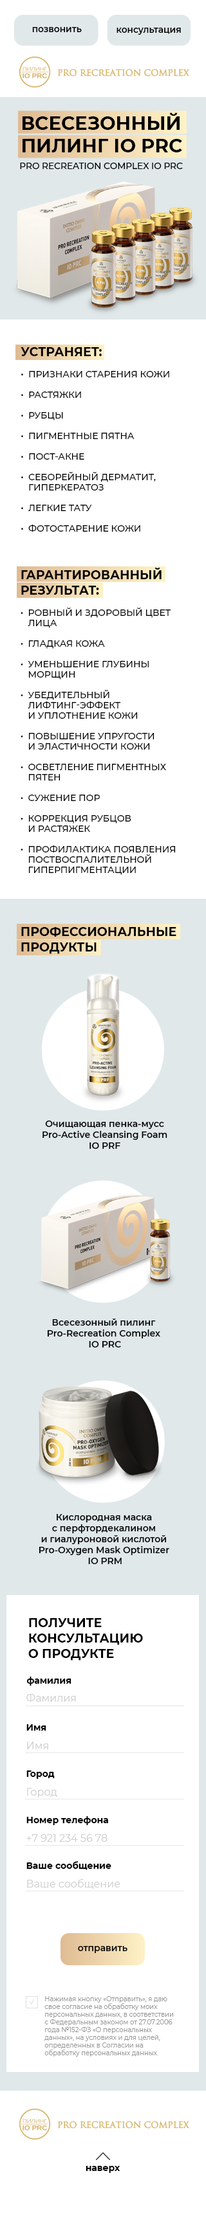
<style>
.page{position:relative;width:206px;height:2216px;background:#ffffff}
.page>*{position:absolute;margin:0}
.t1{font:9.6px "Montserrat-SemiBold";color:#000000;scale:0.92 1}
.t2{font:18.8px "Montserrat-Bold";color:#000000}
.t3{font:8.8px "Montserrat-Medium";color:#000000;text-transform:uppercase}
.t4{font:9px/10.3px "Montserrat-Medium";color:#000000}
.t5{font:12.2px "Montserrat-Bold";color:#000000}
.t6{font:9px/10.3px "Montserrat-Medium";color:#000000;text-transform:uppercase}
.t7{font:12.2px/15.4px "Montserrat-Bold";color:#000000;text-transform:uppercase}
.t8{font:9px "Montserrat-SemiBold";color:#000000}
.t9{font:9px "Montserrat-Bold";color:#000000}
.t10{font:10.3px "Montserrat-Regular";color:#cfcfcf}
.t11{font:6.4px/7.7px "Montserrat-Regular";color:#949494}
</style>
<div class="page">
<p class="t1" style="left:32px;top:27px;width:50px;height:5px">позвонить</p>
<p class="t1" style="left:116px;top:28px;width:65px;height:7px">консультация</p>
<p class="t2" style="left:22px;top:113px;width:160px;height:39px">ВСЕСЕЗОННЫЙ <br>ПИЛИНГ IO PRC</p>
<p class="t3" style="left:20px;top:163px;width:163px;height:6px">pro recreation complex io prc</p>
<p class="t4" style="left:21px;top:347px;width:148px;height:185px"><span class="t5">УСТРАНЯЕТ:<br><br></span>• ПРИЗНАКИ СТАРЕНИЯ КОЖИ<br><br>• РАСТЯЖКИ<br><br>• РУБЦЫ<br><br>• ПИГМЕНТНЫЕ ПЯТНА<br><br>• ПОСТ-АКНЕ<br><br>• СЕБОРЕЙНЫЙ ДЕРМАТИТ,    ГИПЕРКЕРАТОЗ<br><br>• ЛЕГКИЕ ТАТУ<br><br>• ФОТОСТАРЕНИЕ КОЖИ</p>
<p class="t6" style="left:21px;top:568px;width:155px;height:307px"><span class="t7">ГАРАНТИРОВАННЫЙ РЕЗУЛЬТАТ:<br><br></span><span class="t4">• </span>ровный и здоровый цвет   лица<br><br><span class="t4">• </span>гладкая кожа<br><br><span class="t4">• </span>уменьшение глубины    морщин<br><br><span class="t4">• </span>убедительный<br> лифтинг-эффект <br> и уплотнение кожи<br><br><span class="t4">• </span>повышение упругости <br> и эластичности кожи<br><br><span class="t4">• </span>осветление пигментных   пятен<br><br><span class="t4">• </span>сужение пор<br><br><span class="t4">• </span>коррекция рубцов <br> и растяжек<br><br><span class="t4">• </span>профилактика появления   поствоспалительной    гиперпигментации</p>
<p class="t7" style="left:21px;top:927px;width:155px;height:27px">ПРОФЕССИОНАЛЬНЫЕ<br>ПРОДУКТЫ</p>
<p class="t8" style="left:42px;top:1120px;width:125px;height:29px;text-align:center">Очищающая пенка-мусс <br>Pro-Active Cleansing Foam <br>IO PRF</p>
<p class="t8" style="left:47px;top:1318px;width:113px;height:29px;text-align:center">Всесезонный пилинг <br>Pro-Recreation Complex <br>IO PRC</p>
<p class="t8" style="left:39px;top:1514px;width:130px;height:50px;text-align:center">Кислородная маска <br>с перфтордекалином <br>и гиалуроновой кислотой <br>Pro-Oxygen Mask Optimizer <br>IO PRM</p>
<p class="t7" style="left:28px;top:1618px;width:115px;height:43px">получите консультацию <br>о продукте</p>
<p class="t9" style="left:26px;top:1677px;width:45px;height:9px">фамилия</p>
<p class="t10" style="left:26px;top:1694px;width:50px;height:8px">Фамилия</p>
<p class="t9" style="left:26px;top:1724px;width:20px;height:7px">Имя</p>
<p class="t10" style="left:27px;top:1742px;width:21px;height:7px">Имя</p>
<p class="t9" style="left:26px;top:1770px;width:29px;height:9px">Город</p>
<p class="t10" style="left:27px;top:1788px;width:30px;height:9px">Город</p>
<p class="t9" style="left:26px;top:1816px;width:82px;height:9px">Номер телефона</p>
<p class="t10" style="left:26px;top:1834px;width:81px;height:8px">+7 921 234 56 78</p>
<p class="t9" style="left:26px;top:1861px;width:85px;height:9px">Ваше сообщение</p>
<p class="t10" style="left:27px;top:1878px;width:93px;height:11px">Ваше сообщение</p>
<p class="t8" style="left:78px;top:1946px;width:49px;height:7px">отправить</p>
<p class="t11" style="left:44px;top:1996px;width:129px;height:60px">Нажимая кнопку «Отправить», я даю свое согласие на обработку моих персональных данных, в соответствии с Федеральным законом от 27.07.2006 года №152-ФЗ «О персональных данных», на условиях и для целей, определенных в Согласии на обработку персональных данных.</p>
<p class="t9" style="left:86px;top:2166px;width:34px;height:7px">наверх</p>
</div>
